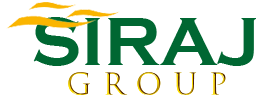
<style>
.page{position:relative;width:280px;height:96px;background:#ffffff}
.page>*{position:absolute;margin:0}
.t1{font:70px "CopperplateGothic-Bold";color:#006732}
.t2{font:29px "TrajanColor-Concept";letter-spacing:0.38em}
</style>
<div class="page">
<p class="t1" style="left:33px;top:17px;width:223px;height:49px">SIRAJ</p>
<p class="t2" style="left:68px;top:72px;width:158px;height:23px">GROUP</p>
</div>
